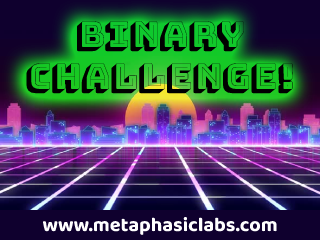
<style>
.page{position:relative;width:320px;height:240px}
.page>*{position:absolute;margin:0}
.t1{font:35px "BungeeShade-Regular";color:#000000}
.t2{font:20px "Baloo2-Bold";color:#ffffff}
</style>
<div class="page">
<p class="t1" style="left:26px;top:21px;width:267px;height:73px;text-align:center">BINARY<br>CHALLENGE!</p>
<p class="t2" style="left:42px;top:216px;width:235px;height:19px">www.metaphasiclabs.com</p>
</div>
